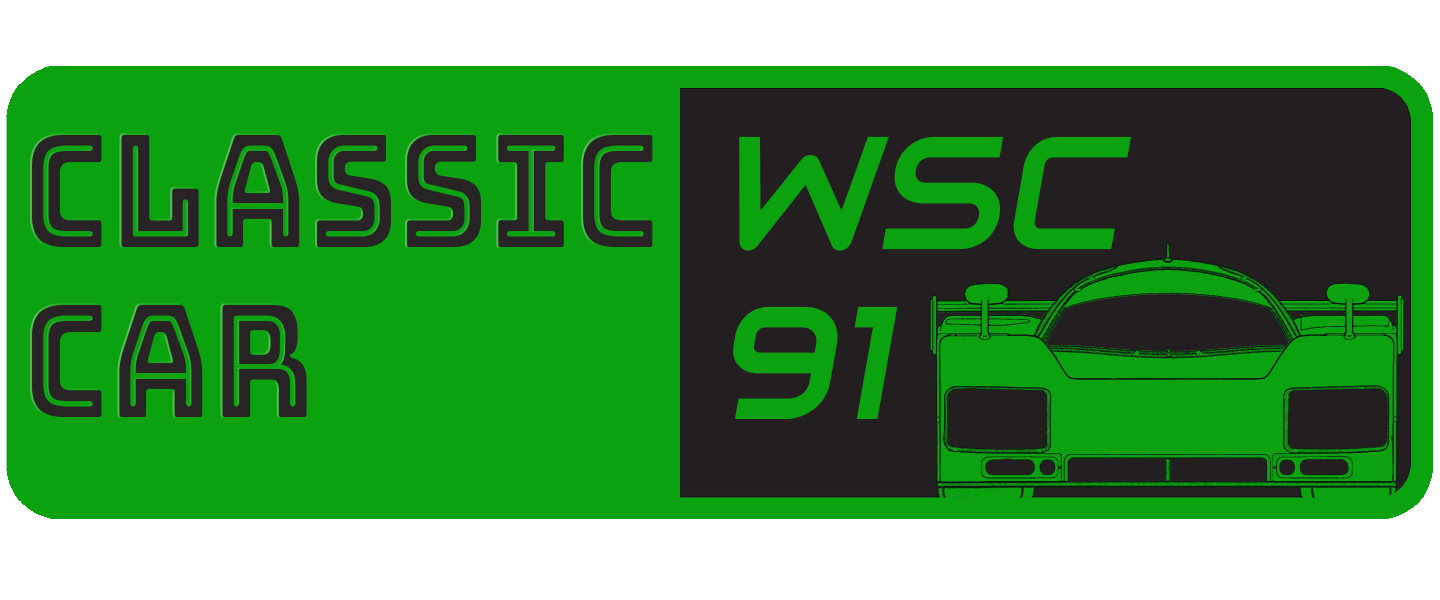
<style>
.page{position:relative;width:1440px;height:600px;background:#0ba210}
.page>*{position:absolute;margin:0}
.t1{font:160px/170.9px "BungeeInline-Regular";color:#282324;scale:0.87 1}
.t2{font:160px/170.9px "Audiowide-Regular";color:#0ba210;font-style:italic}
</style>
<div class="page">
<p class="t1" style="left:30px;top:133px;width:625px;height:286px">Classic<br>Car</p>
<p class="t2" style="left:733px;top:136px;width:398px;height:283px">WSC<br>91</p>
</div>
